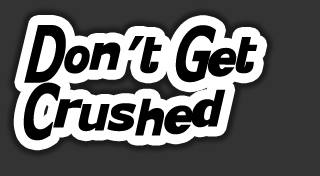
<style>
.page{position:relative;width:320px;height:176px;background:#333333}
.page>*{position:absolute;margin:0}
.t1{font:48px "KittyKatt";color:#000000}
</style>
<div class="page">
<p class="t1" style="left:23px;top:25px;width:235px;height:116px">Don’t Get Crushed</p>
</div>
